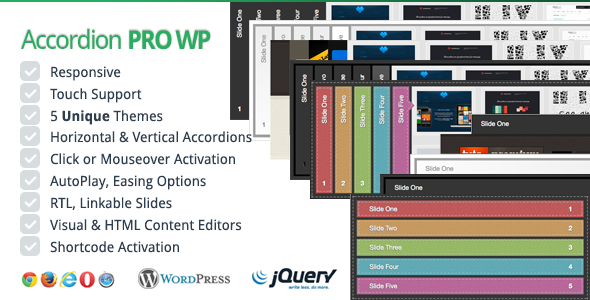
<style>
.page{position:relative;width:590px;height:300px;background:#ffffff}
.page>*{position:absolute;margin:0}
.t1{font:26px "DroidSans";letter-spacing:-0.075em;color:#27ae60}
.t2{font:26px "DroidSans-Bold";letter-spacing:-0.075em;color:#27ae60;scale:0.96 1}
.t3{font:14.1px "DroidSans";color:#2c3e50}
.t4{font:14.1px "DroidSans-Bold";color:#2c3e50}
</style>
<div class="page">
<p class="t1" style="left:21px;top:29px;width:100px;height:20px">Accordion</p>
<p class="t2" style="left:129px;top:30px;width:82px;height:20px">PRO WP</p>
<p class="t3" style="left:51px;top:66px;width:70px;height:15px">Responsive</p>
<p class="t3" style="left:50px;top:88px;width:92px;height:15px">Touch Support</p>
<p class="t4" style="left:51px;top:110px;width:112px;height:15px"><span class="t3">5 </span>Unique<span class="t3"> Themes</span></p>
<p class="t3" style="left:51px;top:131px;width:201px;height:12px">Horizontal &amp; Vertical Accordions</p>
<p class="t3" style="left:50px;top:153px;width:185px;height:12px">Click or Mouseover Activation</p>
<p class="t3" style="left:50px;top:175px;width:156px;height:15px">AutoPlay, Easing Options</p>
<p class="t3" style="left:51px;top:197px;width:121px;height:13px">RTL, Linkable Slides</p>
<p class="t3" style="left:50px;top:219px;width:192px;height:12px">Visual &amp; HTML Content Editors</p>
<p class="t3" style="left:50px;top:241px;width:129px;height:12px">Shortcode Activation</p>
</div>
